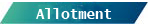
<style>
.page{position:relative;width:148px;height:25px}
.page>*{position:absolute;margin:0}
.t1{font:14px "LucidaSans-TypewriterBold";color:#ffffff}
</style>
<div class="page">
<p class="t1" style="left:36px;top:8px;width:76px;height:11px">Allotment</p>
</div>
